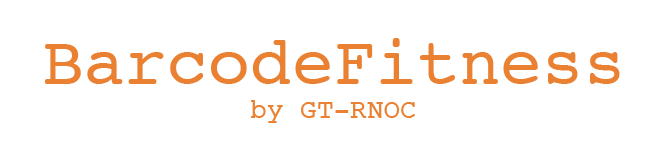
<style>
.page{position:relative;width:658px;height:145px;background:#ffffff}
.page>*{position:absolute;margin:0}
.t1{font:69.4px "Courier";color:#ea8132}
.t2{font:27.8px "Courier";color:#ea8132}
</style>
<div class="page">
<p class="t1" style="left:44px;top:38px;width:576px;height:85px;text-align:center">BarcodeFitness<br><span class="t2">by GT-RNOC</span></p>
</div>
